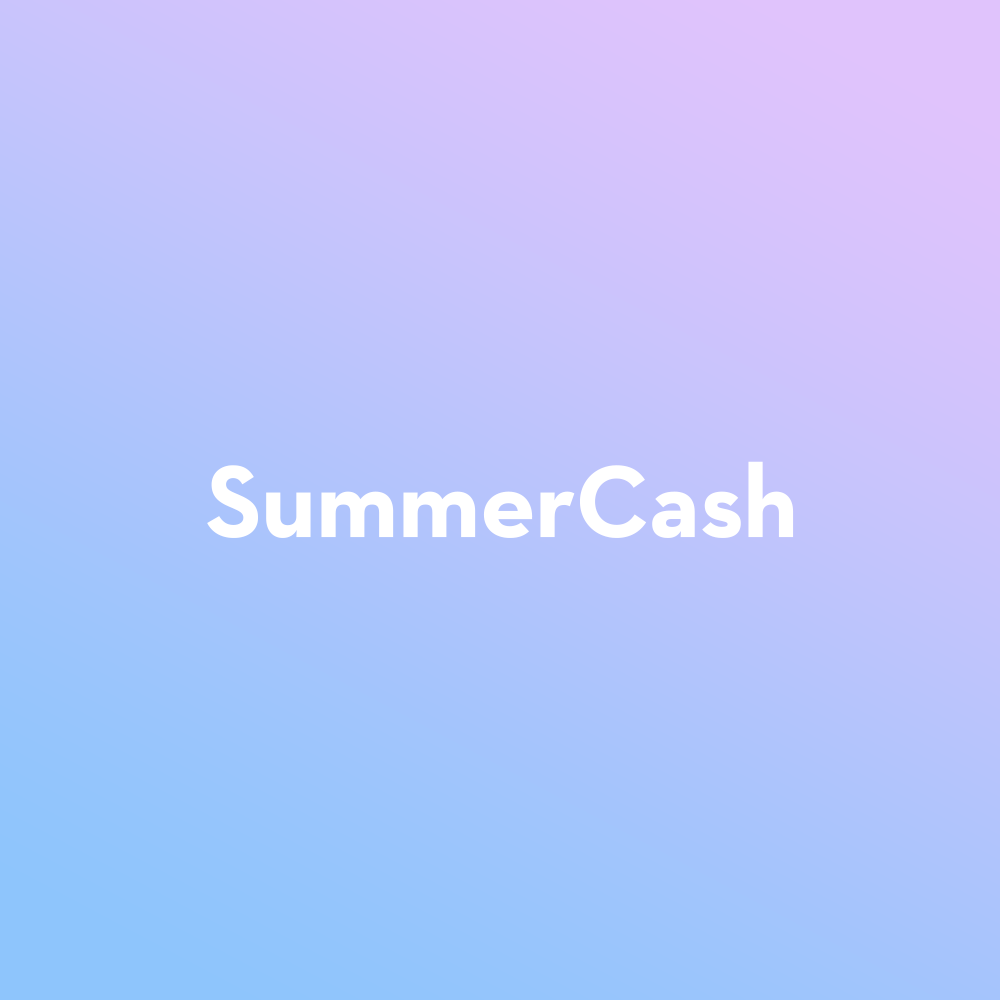
<style>
.page{position:relative;width:1000px;height:1000px}
.page>*{position:absolute;margin:0}
.t1{font:104.2px "NeutraText-Bold";letter-spacing:-0.005em;color:#ffffff}
</style>
<div class="page">
<p class="t1" style="left:207px;top:461px;width:587px;height:77px">SummerCash</p>
</div>
